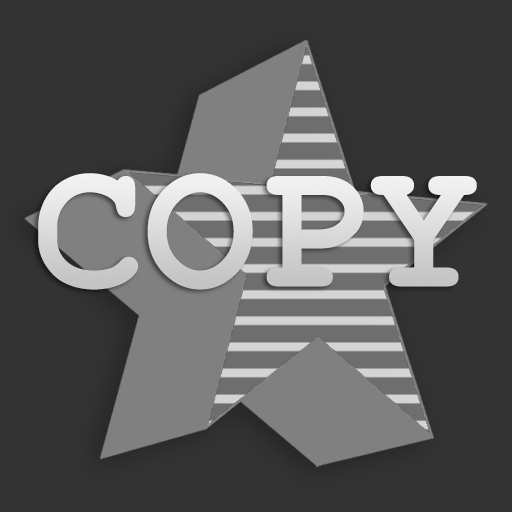
<style>
.page{position:relative;width:512px;height:512px;background:#333333}
.page>*{position:absolute;margin:0}
.t1{font:186.2px "CourierNewPS-BoldMT";color:#dedede;text-transform:uppercase}
</style>
<div class="page">
<p class="t1" style="left:38px;top:173px;width:439px;height:117px">COPY</p>
</div>
